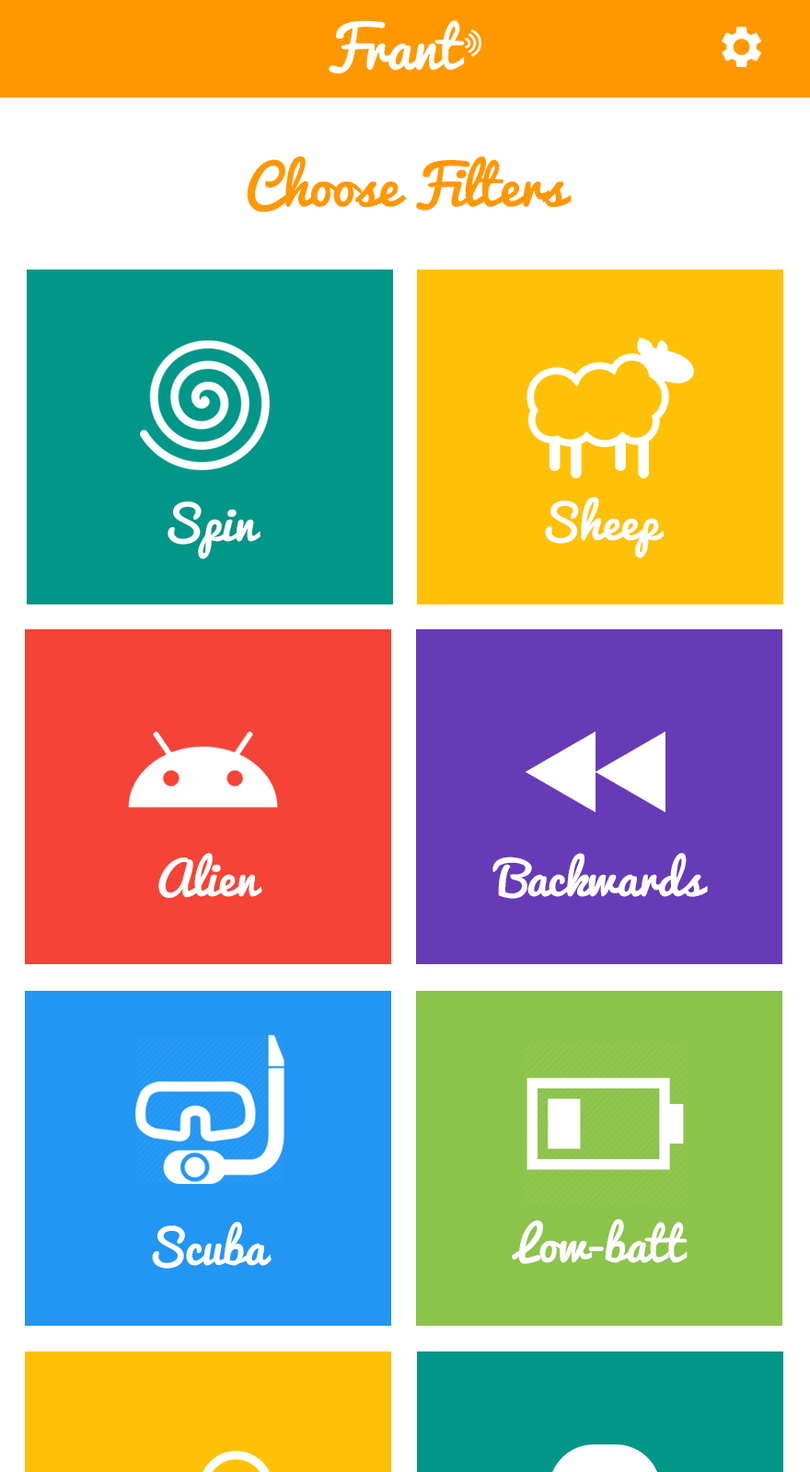
<style>
.page{position:relative;width:810px;height:1472px;background:#ffffff}
.page>*{position:absolute;margin:0}
.t1{font:53.7px "Pacifico-Regular";color:#ff9800}
.t2{font:46px "Pacifico-Regular";color:#ffffff}
</style>
<div class="page">
<p class="t1" style="left:247px;top:156px;width:324px;height:57px">Choose Filters</p>
<p class="t2" style="left:545px;top:497px;width:119px;height:62px">Sheep</p>
<p class="t2" style="left:167px;top:502px;width:93px;height:58px">Spin</p>
<p class="t2" style="left:158px;top:853px;width:104px;height:45px">Alien</p>
<p class="t2" style="left:492px;top:853px;width:216px;height:46px">Backwards</p>
<p class="t2" style="left:152px;top:1222px;width:119px;height:47px">Scuba</p>
<p class="t2" style="left:512px;top:1219px;width:175px;height:45px">Low-batt</p>
</div>
